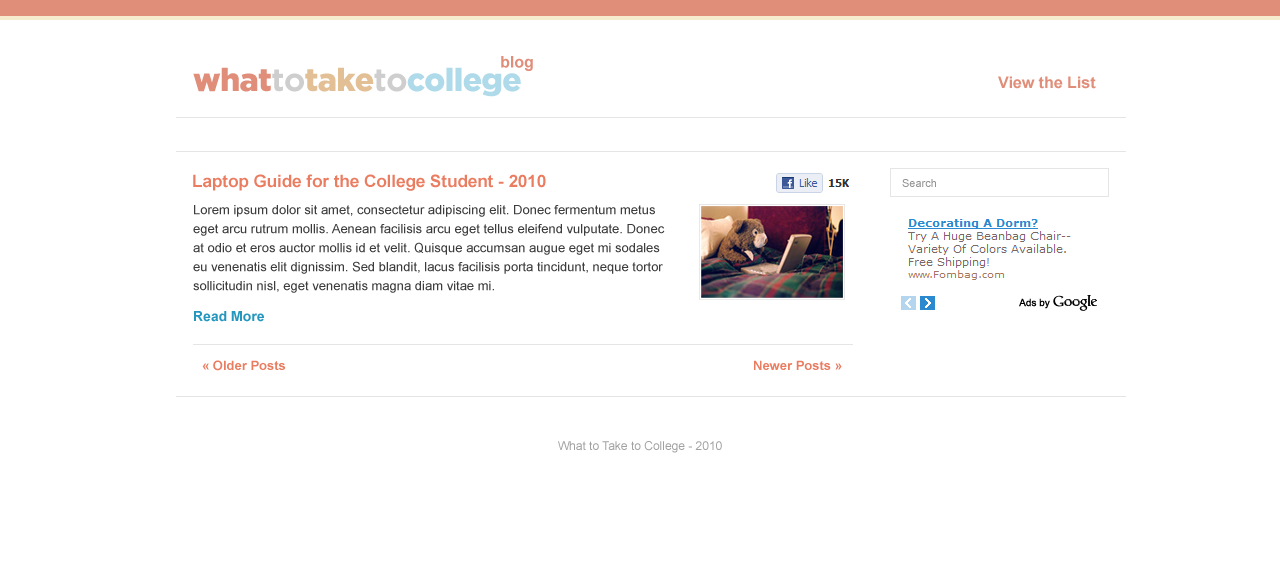
<style>
.page{position:relative;width:1280px;height:581px;background:#ffffff}
.page>*{position:absolute;margin:0}
.t1{font:16px "Arial-BoldMT";color:#e08e79}
.t2{font:32px "GothamBlack";letter-spacing:-0.02em;color:#aedae9}
.t3{font:32px "GothamBlack";letter-spacing:-0.02em;color:#e08e79}
.t4{font:32px "GothamBold";letter-spacing:-0.02em;color:#cecece}
.t5{font:32px "GothamBlack";letter-spacing:-0.02em;color:#e3bf95}
.t6{font:17px "Arial-BoldMT";color:#ea7c60}
.t7{font:11px "ArialMT";color:#919191}
.t8{font:13px/19px "ArialMT";color:#3d3d3d}
.t9{font:14px "Arial-BoldMT";color:#2597be}
.t10{font:13px "Arial-BoldMT";color:#ea7c60}
.t11{font:12px "ArialMT";color:#a1a1a1}
</style>
<div class="page">
<p class="t1" style="left:501px;top:56px;width:32px;height:15px">blog</p>
<p class="t2" style="left:193px;top:67px;width:328px;height:30px"><span class="t3">what</span><span class="t4">to</span><span class="t5">take</span><span class="t4">to</span>college</p>
<p class="t1" style="left:998px;top:76px;width:98px;height:13px">View the List</p>
<p class="t6" style="left:193px;top:174px;width:353px;height:17px">Laptop Guide for the College Student - 2010</p>
<p class="t7" style="left:902px;top:179px;width:34px;height:8px">Search</p>
<p class="t8" style="left:193px;top:205px;width:472px;height:88px">Lorem ipsum dolor sit amet, consectetur adipiscing elit. Donec fermentum metus eget arcu rutrum mollis. Aenean facilisis arcu eget tellus eleifend vulputate. Donec at odio et eros auctor mollis id et velit. Quisque accumsan augue eget mi sodales eu venenatis elit dignissim. Sed blandit, lacus facilisis porta tincidunt, neque tortor sollicitudin nisl, eget venenatis magna diam vitae mi.</p>
<p class="t9" style="left:194px;top:311px;width:70px;height:11px">Read More</p>
<p class="t10" style="left:202px;top:360px;width:83px;height:11px">« Older Posts</p>
<p class="t10" style="left:754px;top:360px;width:88px;height:10px">Newer Posts »</p>
<p class="t11" style="left:558px;top:441px;width:164px;height:12px">What to Take to College - 2010</p>
</div>
